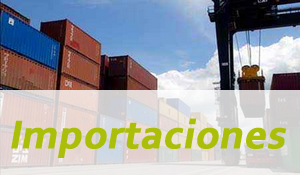
<style>
.page{position:relative;width:300px;height:175px}
.page>*{position:absolute;margin:0}
.t1{font:41.7px "Corbel-Bold";letter-spacing:0.005em;color:#abbf08;font-weight:bold;font-style:italic}
</style>
<div class="page">
<p class="t1" style="left:11px;top:118px;width:275px;height:40px">Importaciones</p>
</div>
